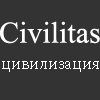
<style>
.page{position:relative;width:100px;height:100px;background:#333333}
.page>*{position:absolute;margin:0}
.t1{font:30px "TimesNewRomanPSMT";color:#ffffff}
.t2{font:18px "MinionPro-Regular";color:#ffffff}
.t3{font:18px "AdobeArabic-Regular";color:#ffffff}
</style>
<div class="page">
<p class="t1" style="left:0px;top:21px;width:100px;height:23px">Civilitas</p>
<p class="t2" style="left:2px;top:61px;width:97px;height:11px"><span class="t3"><br></span>цивилизация</p>
</div>
